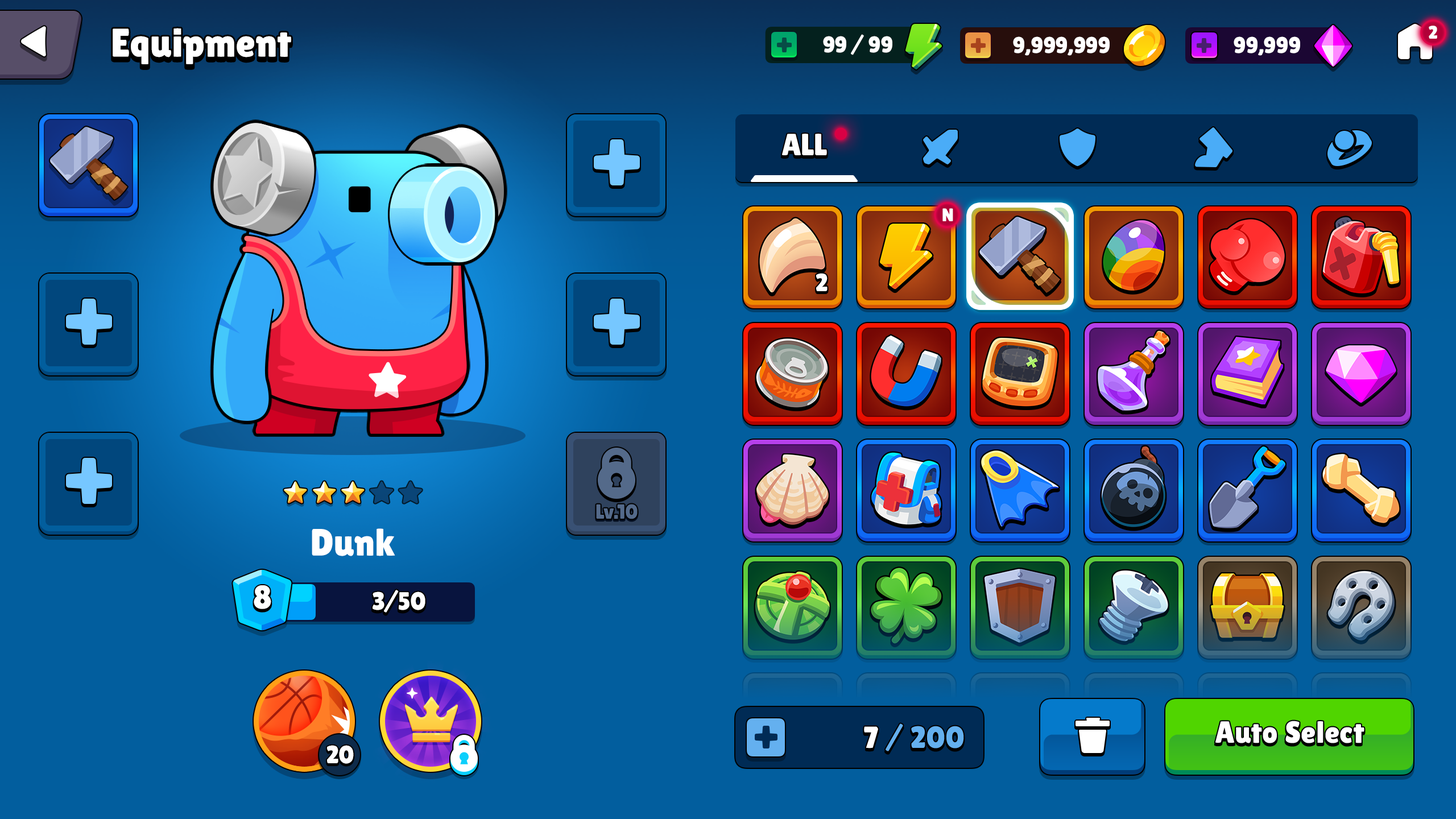
<style>
.page{position:relative;width:1456px;height:819px;background:#025e9e}
.page>*{position:absolute;margin:0}
.t1{font:39.8px "LilitaOne";color:#ffffff}
.t2{font:18.2px "LilitaOne";color:#ffffff;text-transform:uppercase}
.t3{font:22.7px "LilitaOne";letter-spacing:-0.01em;color:#ffffff;text-transform:uppercase}
.t4{font:30.7px "LilitaOne";color:#ffffff;text-transform:uppercase}
.t5{font:25px "LilitaOne";letter-spacing:0.02em;color:#ffffff;text-transform:uppercase}
.t6{font:20.5px "LilitaOne";color:#546a8a}
.t7{font:37.9px "LilitaOne";color:#ffffff}
.t8{font:33px "LilitaOne";color:#ffffff;text-transform:uppercase}
.t9{font:25px "LilitaOne";color:#ffffff;text-transform:uppercase}
.t10{font:30.7px "LilitaOne";letter-spacing:0.02em;color:#64b0ef}
.t11{font:30.7px "LilitaOne";letter-spacing:0.02em;color:#ffffff}
.t12{font:25px "LilitaOne";color:#ffffff}
</style>
<div class="page">
<p class="t1" style="left:113px;top:28px;width:178px;height:36px">Equipment</p>
<p class="t2" style="left:1429px;top:26px;width:8px;height:13px">2</p>
<p class="t3" style="left:823px;top:34px;width:69px;height:21px">99 / 99</p>
<p class="t3" style="left:1013px;top:36px;width:97px;height:20px">9,999,999</p>
<p class="t3" style="left:1234px;top:36px;width:66px;height:20px">99,999</p>
<p class="t4" style="left:781px;top:134px;width:46px;height:21px">All</p>
<p class="t2" style="left:942px;top:208px;width:11px;height:13px">N</p>
<p class="t5" style="left:816px;top:273px;width:12px;height:18px">2</p>
<p class="t6" style="left:596px;top:504px;width:42px;height:15px">Lv.10</p>
<p class="t7" style="left:312px;top:528px;width:83px;height:28px">Dunk</p>
<p class="t8" style="left:254px;top:585px;width:17px;height:24px">8</p>
<p class="t9" style="left:373px;top:590px;width:52px;height:23px">3/50</p>
<p class="t10" style="left:864px;top:723px;width:100px;height:28px"><span class="t11">7 </span>/ 200</p>
<p class="t11" style="left:1215px;top:721px;width:149px;height:22px">Auto Select</p>
<p class="t12" style="left:326px;top:745px;width:28px;height:19px">20</p>
</div>
